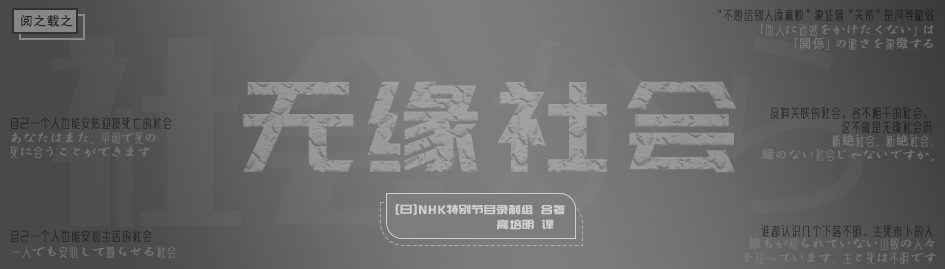
<style>
.page{position:relative;width:945px;height:269px}
.page>*{position:absolute;margin:0}
.t1{font:12.5px "SimHei";letter-spacing:0.075em;color:#292929}
.t2{font:12.5px "SJyazhihei-Regular";letter-spacing:0.075em;color:#252526}
.t3{font:12.5px/14px "SJyazhihei-Regular";letter-spacing:0.075em;color:#868686}
.t4{font:12.5px/14px "AdobeHeitiStd-Regular";letter-spacing:0.075em;color:#868686}
.t5{font:125px "PangMenZhengDao";letter-spacing:0.075em;color:#969697}
.t6{font:12.5px/14px "SJyazhihei-Regular";letter-spacing:0.075em;color:#292929}
.t7{font:12.5px "SJyazhihei-Regular";letter-spacing:0.075em;color:#252626}
.t8{font:12.5px "PangMenZhengDao";letter-spacing:0.075em;color:#cfcfcf}
.t9{font:12.5px "SJyazhihei-Regular";letter-spacing:0.075em;color:#212121}
.t10{font:12.5px "SJyazhihei-Regular";letter-spacing:0.075em;color:#2d2d2d}
.t11{font:12.5px "SJyazhihei-Regular";letter-spacing:0.075em;color:#868686}
</style>
<div class="page">
<p class="t1" style="left:21px;top:15px;width:52px;height:12px">阅之载之</p>
<p class="t2" style="left:718px;top:9px;width:216px;height:12px">“不想给别人添麻烦”象征着“关系”是何等脆弱</p>
<p class="t3" style="left:761px;top:24px;width:173px;height:26px;text-align:right;opacity:0.8">「他人に迷惑をかけたくない」は<br>「<span class="t4">関係</span>」の脆さを象<span class="t4">徴</span>する</p>
<p class="t5" style="left:243px;top:81px;width:494px;height:92px">无缘社会</p>
<p class="t6" style="left:770px;top:107px;width:162px;height:26px;text-align:right">没有关联的社会，各不相干的社会，<br>这不就是无缘社会吗</p>
<p class="t7" style="left:11px;top:117px;width:161px;height:12px">自己一个人也能安然迎接死亡的社会</p>
<p class="t3" style="left:10px;top:132px;width:146px;height:26px;opacity:0.8">あなたはまた、平和で死の<br>死に会うことができます</p>
<p class="t3" style="left:762px;top:134px;width:172px;height:27px;text-align:right;opacity:0.8">断<span class="t4">絶</span>社会、断<span class="t4">絶</span>社会、<br><span class="t4">縁</span>のない社会じゃないですか。</p>
<p class="t8" style="left:395px;top:204px;width:170px;height:11px">[日]NHK特别节目录制组 合著</p>
<p class="t8" style="left:497px;top:219px;width:57px;height:11px">高培明 译</p>
<p class="t9" style="left:11px;top:230px;width:141px;height:12px">自己一个人也能安心生活的社会</p>
<p class="t10" style="left:761px;top:225px;width:172px;height:12px">谁都认识几个下落不明，生死未卜的人</p>
<p class="t11" style="left:12px;top:246px;width:164px;height:12px;opacity:0.8">一人でも安心して暮らせる社会</p>
<p class="t3" style="left:744px;top:237px;width:192px;height:27px;text-align:right;opacity:0.8"><span class="t4">誰</span>もが知られていない少数の人々<br>を知っています、生と死は不明です</p>
</div>
